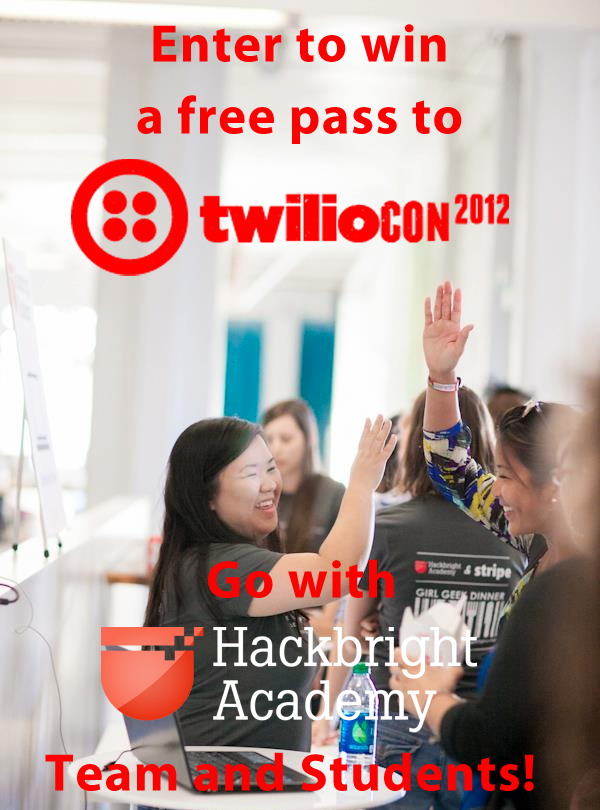
<style>
.page{position:relative;width:600px;height:810px}
.page>*{position:absolute;margin:0}
.t1{font:53px/18px "MyriadPro-Bold";letter-spacing:0.025em;color:#ff0000}
.t2{font:53px "MyriadPro-Bold";letter-spacing:0.025em;color:#ff0000}
</style>
<div class="page">
<p class="t1" style="left:137px;top:24px;width:325px;height:120px;text-align:center">Enter to win<br><br><br><br>a free pass to</p>
<p class="t2" style="left:208px;top:559px;width:186px;height:39px">Go with</p>
<p class="t2" style="left:45px;top:752px;width:489px;height:39px">Team and Students!</p>
</div>
